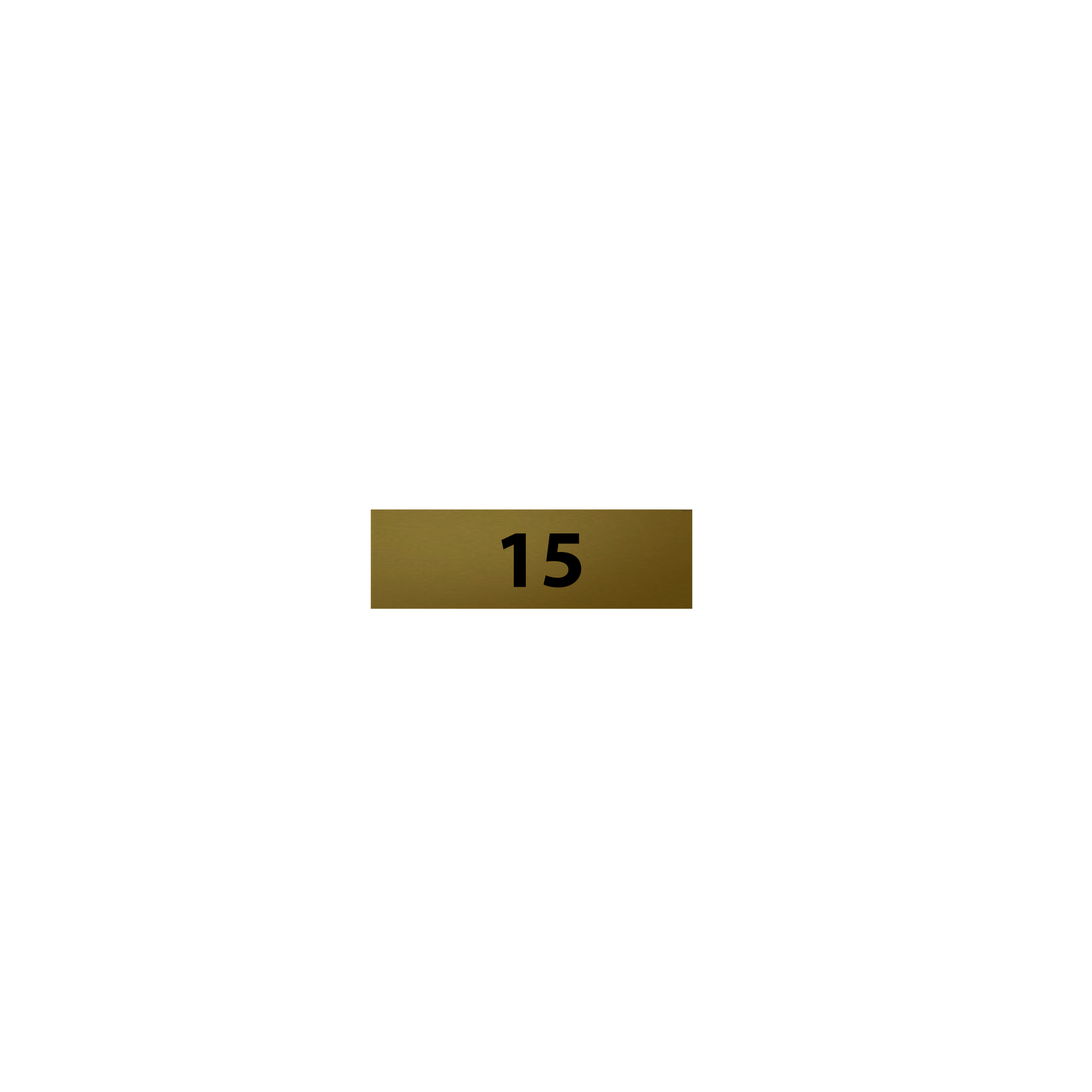
<style>
.page{position:relative;width:1092px;height:1092px;background:#ffffff}
.page>*{position:absolute;margin:0}
.t1{font:81.9px "MyriadPro-Bold";color:#000000}
</style>
<div class="page">
<p class="t1" style="left:501px;top:533px;width:80px;height:54px">15</p>
</div>
